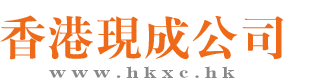
<style>
.page{position:relative;width:310px;height:82px;background:#ffffff}
.page>*{position:absolute;margin:0}
.t1{font:48px "ç»å¸ç²å®ç¹-regular";color:#ee6a19}
.t2{font:15.4px "ç»å¸ç²å®ç¹-regular";letter-spacing:0.23em;color:#888888;scale:1.43 1}
</style>
<div class="page">
<p class="t1" style="left:0px;top:15px;width:283px;height:45px">香港现成公司</p>
<p class="t2" style="left:49px;top:66px;width:186px;height:12px">www.hkxc.hk</p>
</div>
